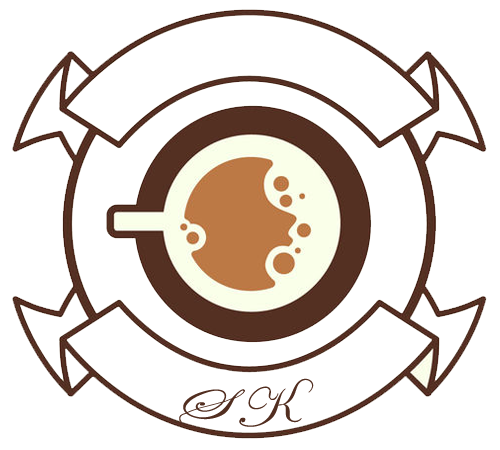
<style>
.page{position:relative;width:500px;height:450px;background:#ffffff}
.page>*{position:absolute;margin:0}
.t1{font:50px "EdwardianScriptITC";color:#522e20}
</style>
<div class="page">
<p class="t1" style="left:179px;top:378px;width:135px;height:49px">S K</p>
</div>
